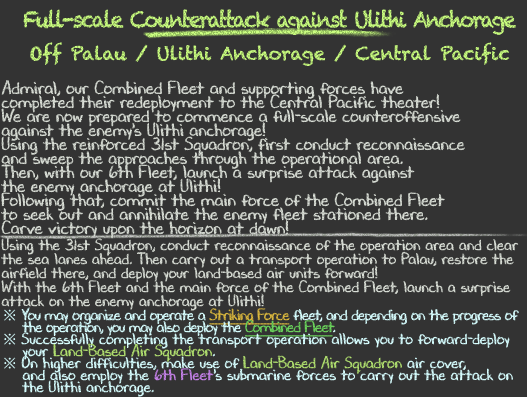
<style>
.page{position:relative;width:527px;height:397px;background:#333333}
.page>*{position:absolute;margin:0}
.t1{font:22px/36px "Chalkduster";letter-spacing:-0.08em;scale:0.9 1}
.t2{font:18px/36px "Chalkduster"}
.t3{font:18px/14px "DJBChalkItUp";color:#d9ded6}
.t4{font:18px/2px "DJBChalkItUp";color:#d9ded6}
.t5{font:16px/14px "DJBChalkItUp";color:#d9ded6}
.t6{font:16px/12px "TimesNewRomanPSMT";color:#d7feff}
.t7{font:16px/12px "DJBChalkItUp";letter-spacing:-0.04em;color:#d7feff}
.t8{font:16px/12px "DJBChalkItUp";letter-spacing:-0.04em;color:#dbb940;text-decoration:underline}
.t9{font:16px/12px "DJBChalkItUp";letter-spacing:-0.04em;color:#6cd45d;text-decoration:underline}
.t10{font:16px/12px "DJBChalkItUp";color:#d7feff}
.t11{font:16px/12px "DJBChalkItUp";color:#b1e070}
.t12{font:16px/12px "DJBChalkItUp";color:#c683ea}
</style>
<div class="page">
<p class="t1" style="left:23px;top:9px;width:493px;height:57px;text-align:center">Full-scale Counterattack against Ulithi Anchorage<br><span class="t2">Off Palau / Ulithi Anchorage / Central Pacific</span></p>
<p class="t3" style="left:1px;top:80px;width:518px;height:317px">Admiral, our Combined Fleet and supporting forces have<br>completed their redeployment to the Central Pacific theater! <br>We are now prepared to commence a full-scale counteroffensive<br>against the enemy's Ulithi anchorage!<br>Using the reinforced 31st Squadron, first conduct reconnaissance<br>and sweep the approaches through the operational area.<br>Then, with our 6th Fleet, launch a surprise attack against<br>the enemy anchorage at Ulithi!<br>Following that, commit the main force of the Combined Fleet<br>to seek out and annihilate the enemy fleet stationed there.<br><span class="t4">Carve victory upon the horizon at dawn!<br><br></span><span class="t5">Using the 31st Squadron, conduct reconnaissance of the operation area and clear<br>the sea lanes ahead. Then carry out a transport operation to Palau, restore the<br>airfield there, and deploy your land-based air units forward!<br>With the 6th Fleet and the main force of the Combined Fleet, launch a surprise<br>attack on the enemy anchorage at Ulithi!<br></span><span class="t6">※ </span><span class="t7">You may organize and operate a </span><span class="t8">Striking Force</span><span class="t7"> fleet, and depending on the progress of<br>　 the operation, you may also deploy the </span><span class="t9">Combined Fleet</span><span class="t7">.<br></span><span class="t6">※ </span><span class="t10">Successfully completing the transport operation allows you to forward-deploy<br>　 your </span><span class="t11">Land-Based Air Squadron</span><span class="t10">.<br></span><span class="t6">※ </span><span class="t10">On higher difficulties, make use of </span><span class="t11">Land-Based Air Squadron</span><span class="t10"> air cover, <br>　 and also employ the </span><span class="t12">6th Fleet</span><span class="t10">'s submarine forces to carry out the attack on<br>　 the Ulithi anchorage.</span></p>
</div>
